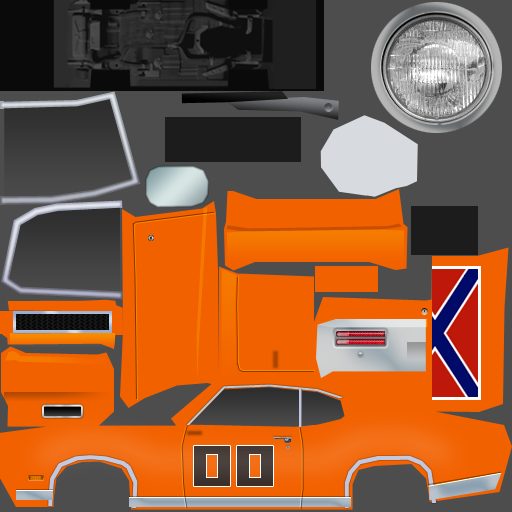
<style>
.page{position:relative;width:512px;height:512px;background:#f26100}
.page>*{position:absolute;margin:0}
.t1{font:106.3px "AcknowledgeTTBRK";letter-spacing:0.02em;color:#443936;scale:0.75 1}
</style>
<div class="page">
<p class="t1" style="left:194px;top:446px;width:79px;height:40px">00</p>
</div>
